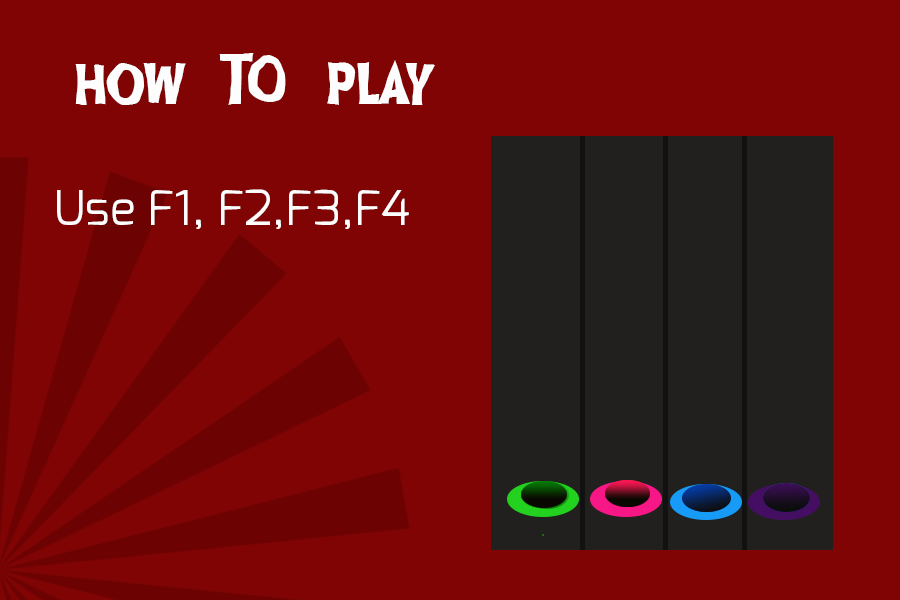
<style>
.page{position:relative;width:900px;height:600px;background:#800404}
.page>*{position:absolute;margin:0}
.t1{font:76px "GhoulishFrightAOE";color:#fdfdfd}
.t2{font:48px "Exo-Regular";color:#fdfdfd}
</style>
<div class="page">
<p class="t1" style="left:75px;top:53px;width:360px;height:52px">how  TO  play</p>
<p class="t2" style="left:57px;top:189px;width:352px;height:40px">Use F1, F2,F3,F4</p>
</div>
